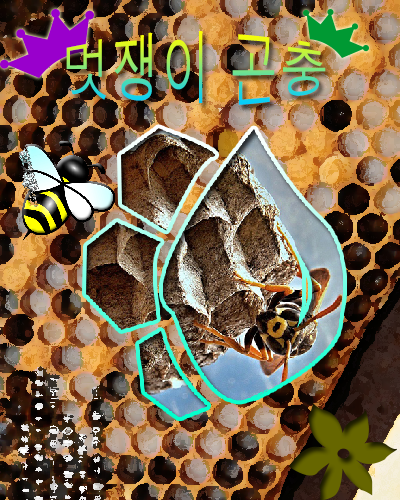
<style>
.page{position:relative;width:400px;height:500px}
.page>*{position:absolute;margin:0}
.t1{font:50px "Dotum"}
</style>
<div class="page">
<p class="t1" style="left:66px;top:31px;width:260px;height:74px">멋쟁이 곤충</p>
</div>
